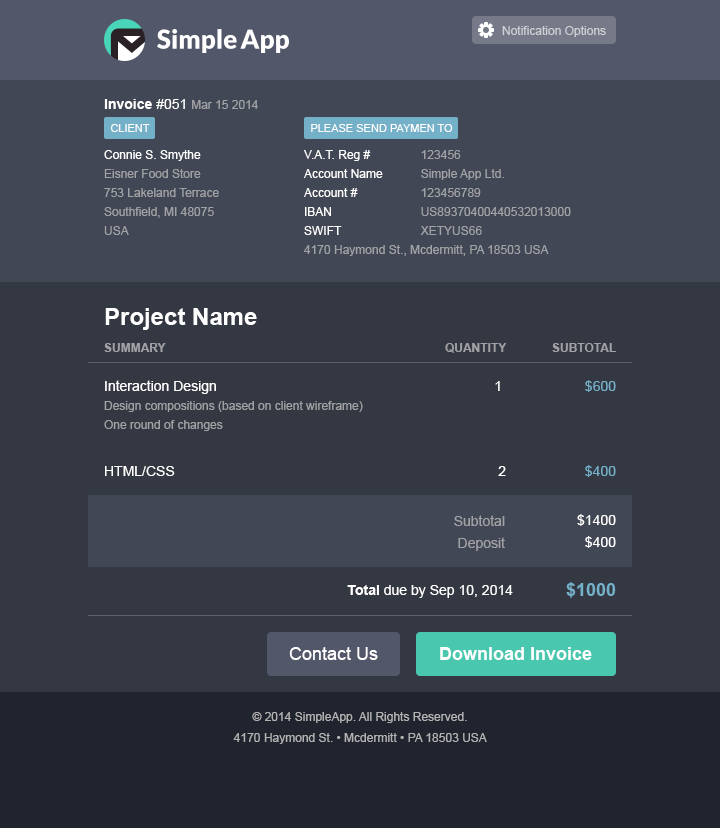
<style>
.page{position:relative;width:720px;height:828px;background:#343843}
.page>*{position:absolute;margin:0}
.t1{font:12px "ArialMT";color:#cfd0d4}
.t2{font:12px "ArialMT";color:#a1a2a5}
.t3{font:14px "Arial-BoldMT";color:#ffffff}
.t4{font:14px "ArialMT";color:#ffffff}
.t5{font:11px "ArialMT";color:#ffffff;text-transform:uppercase}
.t6{font:12px/19px "ArialMT";color:#a1a2a5}
.t7{font:12px/19px "ArialMT";color:#ffffff}
.t8{font:24px "Arial-BoldMT";color:#ffffff}
.t9{font:12px "Arial-BoldMT";color:#a1a2a5;text-transform:uppercase}
.t10{font:14px/22px "ArialMT";color:#ffffff}
.t11{font:14px "ArialMT";color:#75b0c9}
.t12{font:14px/22px "ArialMT";color:#a1a2a5}
.t13{font:18px "Arial-BoldMT";color:#75b0c9}
.t14{font:18px "ArialMT";color:#ffffff}
.t15{font:18px "Arial-BoldMT";color:#ffffff}
.t16{font:12px/21px "ArialMT";color:#b3b3b3}
</style>
<div class="page">
<p class="t1" style="left:502px;top:26px;width:104px;height:11px">Notification Options</p>
<p class="t2" style="left:104px;top:99px;width:154px;height:10px"><span class="t3">Invoice </span><span class="t4">#051 </span>Mar 15 2014</p>
<p class="t5" style="left:111px;top:124px;width:39px;height:8px">client</p>
<p class="t5" style="left:311px;top:124px;width:142px;height:8px">Please send paymen to</p>
<p class="t6" style="left:104px;top:150px;width:115px;height:85px"><span class="t7">Connie S. Smythe<br></span>Eisner Food Store<br>753 Lakeland Terrace<br>Southfield, MI 48075<br>USA</p>
<p class="t7" style="left:304px;top:150px;width:79px;height:85px">V.A.T. Reg #<br>Account Name<br>Account #<br>IBAN<br>SWIFT</p>
<p class="t6" style="left:420px;top:150px;width:151px;height:85px">123456<br>Simple App Ltd.<br>123456789<br>US89370400440532013000<br>XETYUS66</p>
<p class="t2" style="left:304px;top:245px;width:245px;height:11px">4170 Haymond St., Mcdermitt, PA 18503 USA</p>
<p class="t8" style="left:105px;top:308px;width:152px;height:22px">Project Name</p>
<p class="t9" style="left:104px;top:343px;width:62px;height:9px">Summary</p>
<p class="t9" style="left:445px;top:343px;width:62px;height:10px">Quantity</p>
<p class="t9" style="left:552px;top:343px;width:65px;height:9px">Subtotal</p>
<p class="t6" style="left:104px;top:380px;width:259px;height:51px"><span class="t10">Interaction Design<br></span>Design compositions (based on client wireframe)<br>One round of changes</p>
<p class="t4" style="left:495px;top:381px;width:5px;height:10px">1</p>
<p class="t11" style="left:585px;top:380px;width:31px;height:12px">$600</p>
<p class="t4" style="left:105px;top:466px;width:70px;height:10px">HTML/CSS</p>
<p class="t4" style="left:498px;top:466px;width:8px;height:10px">2</p>
<p class="t11" style="left:585px;top:465px;width:31px;height:12px">$400</p>
<p class="t12" style="left:454px;top:515px;width:51px;height:36px;text-align:right">Subtotal<br>Deposit</p>
<p class="t10" style="left:577px;top:514px;width:39px;height:34px;text-align:right">$1400<br>$400</p>
<p class="t13" style="left:566px;top:582px;width:50px;height:16px">$1000</p>
<p class="t4" style="left:347px;top:585px;width:166px;height:13px"><span class="t3">Total</span> due by Sep 10, 2014</p>
<p class="t14" style="left:289px;top:647px;width:89px;height:13px">Contact Us</p>
<p class="t15" style="left:440px;top:647px;width:152px;height:13px">Download Invoice</p>
<p class="t16" style="left:233px;top:712px;width:254px;height:32px;text-align:center">© 2014 SimpleApp. All Rights Reserved.<br>4170 Haymond St. • Mcdermitt • PA 18503 USA</p>
</div>
